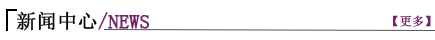
<style>
.page{position:relative;width:435px;height:40px;background:#ffffff}
.page>*{position:absolute;margin:0}
.t1{font:20px "SimSun";letter-spacing:-0.005em;color:#6f2569;font-weight:bold}
.t2{font:20px "SimSun";letter-spacing:-0.005em;color:#020202;font-weight:bold}
.t3{font:12px "SimSun";letter-spacing:-0.005em;color:#6f2569;font-weight:bold}
</style>
<div class="page">
<p class="t1" style="left:17px;top:11px;width:133px;height:20px"><span class="t2">新闻中心</span>/NEWS</p>
<p class="t3" style="left:393px;top:15px;width:38px;height:12px">【更多】</p>
</div>
